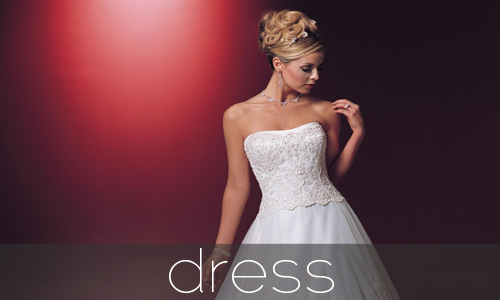
<style>
.page{position:relative;width:500px;height:300px}
.page>*{position:absolute;margin:0}
.t1{font:60px "Raleway-Thin";color:#fffefe;scale:1.14 1}
</style>
<div class="page">
<p class="t1" style="left:169px;top:248px;width:165px;height:46px">dress</p>
</div>
